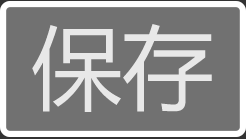
<style>
.page{position:relative;width:246px;height:139px;background:#717171}
.page>*{position:absolute;margin:0}
.t1{font:90.6px "MicrosoftYaHei";color:#ffffff}
</style>
<div class="page">
<p class="t1" style="left:32px;top:24px;width:180px;height:88px">保存</p>
</div>
